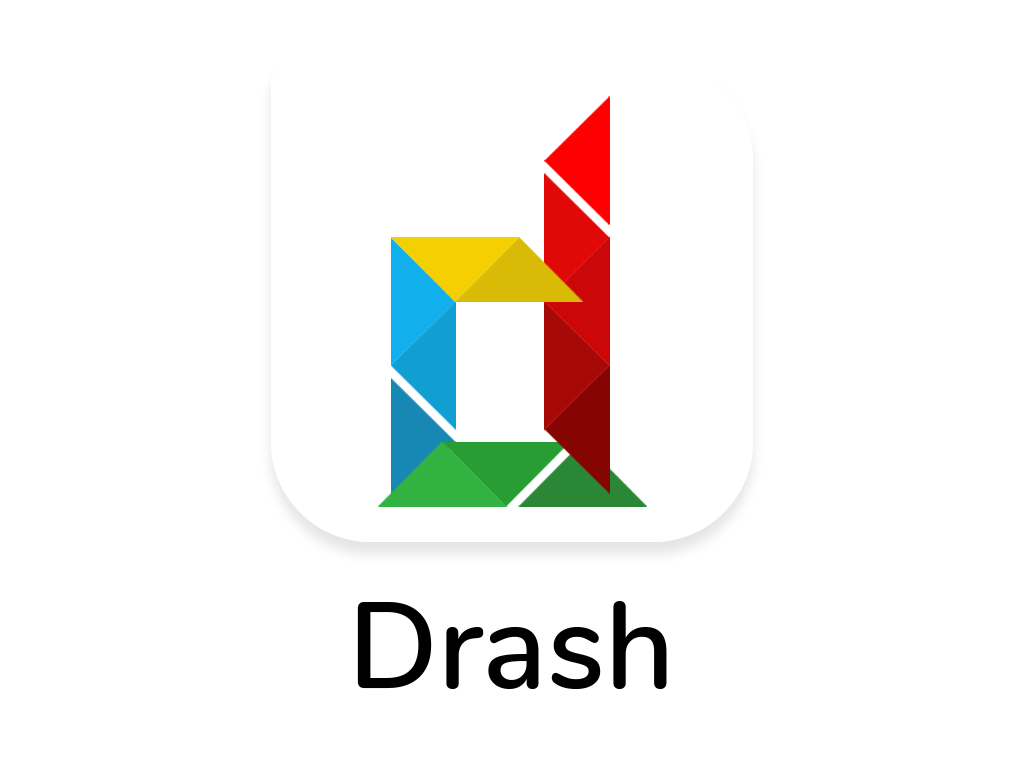
<style>
.page{position:relative;width:1024px;height:768px;background:#ffffff}
.page>*{position:absolute;margin:0}
.t1{font:120.8px "Nunito-SemiBold";color:#000000}
</style>
<div class="page">
<p class="t1" style="left:357px;top:601px;width:310px;height:88px">Drash</p>
</div>
